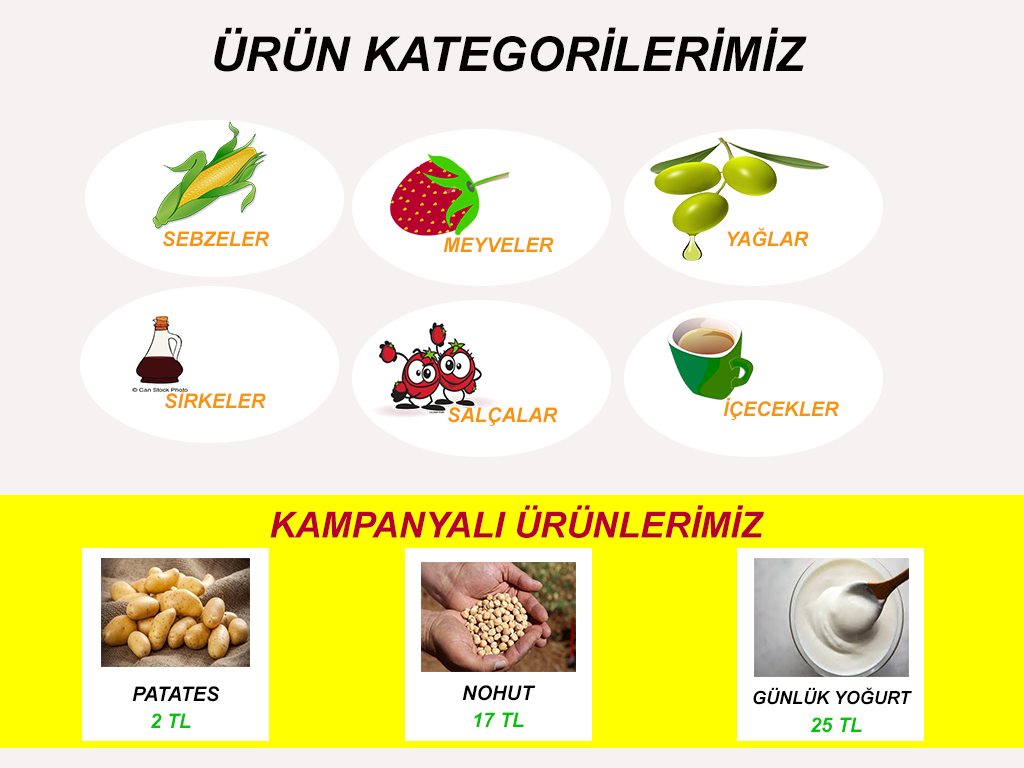
<style>
.page{position:relative;width:1024px;height:768px;background:#f6f2f2}
.page>*{position:absolute;margin:0}
.t1{font:48px "Arial-BoldItalicMT";color:#070000}
.t2{font:20px "Arial-BoldItalicMT";color:#f6950c}
.t3{font:35.8px "Arial-BoldItalicMT";color:#b70030}
.t4{font:20px "Arial-BoldItalicMT";color:#070002}
.t5{font:18px "Arial-BoldItalicMT";color:#000200}
.t6{font:20px "Arial-BoldItalicMT";color:#06c20a}
</style>
<div class="page">
<p class="t1" style="left:214px;top:27px;width:593px;height:45px">ÜRÜN KATEGORİLERİMİZ</p>
<p class="t2" style="left:163px;top:231px;width:106px;height:16px">SEBZELER</p>
<p class="t2" style="left:727px;top:227px;width:82px;height:20px">YAĞLAR</p>
<p class="t2" style="left:443px;top:237px;width:111px;height:15px">MEYVELER</p>
<p class="t2" style="left:165px;top:390px;width:101px;height:19px">SİRKELER</p>
<p class="t2" style="left:723px;top:398px;width:116px;height:22px">İÇECEKLER</p>
<p class="t2" style="left:448px;top:407px;width:110px;height:19px">SALÇALAR</p>
<p class="t3" style="left:270px;top:505px;width:494px;height:33px">KAMPANYALI ÜRÜNLERİMİZ</p>
<p class="t4" style="left:132px;top:686px;width:88px;height:16px">PATATES</p>
<p class="t4" style="left:462px;top:685px;width:74px;height:16px">NOHUT</p>
<p class="t5" style="left:753px;top:687px;width:159px;height:18px">GÜNLÜK YOĞURT</p>
<p class="t6" style="left:151px;top:713px;width:40px;height:15px">2 TL</p>
<p class="t6" style="left:474px;top:712px;width:50px;height:15px">17 TL</p>
<p class="t6" style="left:811px;top:717px;width:51px;height:16px">25 TL</p>
</div>
